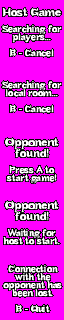
<style>
.page{position:relative;width:64px;height:320px;background:#ff00ff}
.page>*{position:absolute;margin:0}
.t1{font:9px/8px "Bundy-Regular";letter-spacing:-0.01em;color:#ffffff;font-weight:bold}
.t2{font:11px/8px "Bundy-Regular";letter-spacing:-0.01em;color:#ffffff;font-weight:bold}
.t3{font:11px/11px "Bundy-Regular";letter-spacing:-0.01em;color:#ffffff;font-weight:bold}
</style>
<div class="page">
<p class="t1" style="left:2px;top:7px;width:60px;height:50px;text-align:center"><span class="t2">Host Game<br></span><br>Searching for<br>players...<br><br>B - Cancel</p>
<p class="t1" style="left:2px;top:81px;width:60px;height:32px;text-align:center">Searching for<br>local room...<br><br>B - Cancel</p>
<p class="t1" style="left:5px;top:137px;width:54px;height:47px;text-align:center"><span class="t3">Opponent<br>found!<br></span><br>Press A to<br>start game!</p>
<p class="t1" style="left:3px;top:200px;width:57px;height:45px;text-align:center"><span class="t3">Opponent<br>found!<br></span><br>Waiting for<br>host to start.</p>
<p class="t1" style="left:3px;top:265px;width:59px;height:48px;text-align:center">Connection<br>with the<br>opponent has<br>been lost.<br><br>B - Quit</p>
</div>
